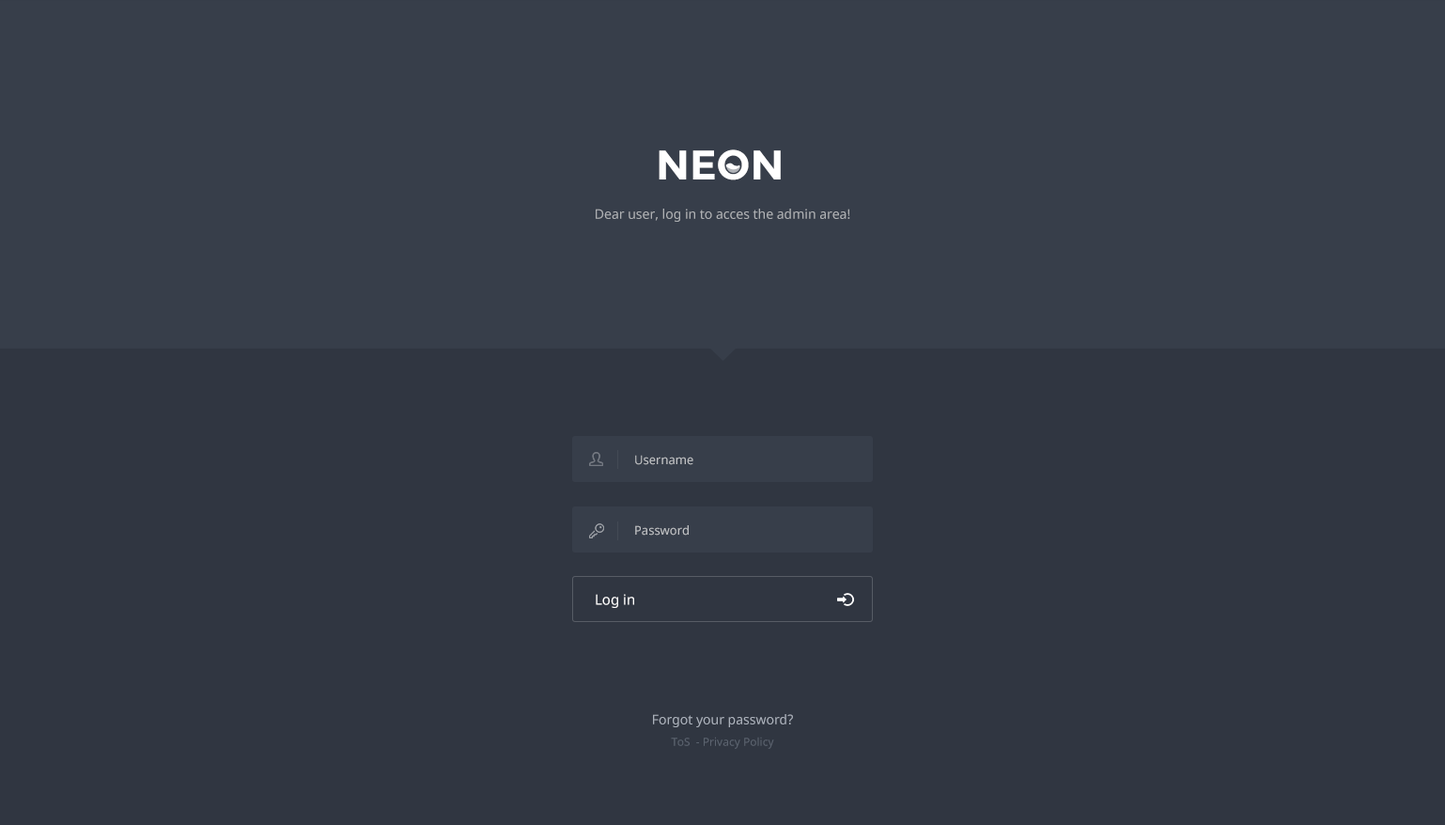
<style>
.page{position:relative;width:1445px;height:825px;background:#303641}
.page>*{position:absolute;margin:0}
.t1{font:41.3px "Montserrat-Bold";color:#ffffff}
.t2{font:13.2px "NotoSans";color:#aeb0b4}
.t3{font:12.2px "NotoSans";color:#c0c1c4}
.t4{font:14.1px "NotoSans";color:#ffffff}
.t5{font:13.2px/28.2px "NotoSans";color:#abb1bb}
.t6{font:11.3px/28.2px "NotoSans";color:#5c6470}
</style>
<div class="page">
<p class="t1" style="left:659px;top:149px;width:122px;height:31px">NEON</p>
<p class="t2" style="left:596px;top:209px;width:254px;height:13px">Dear user, log in to acces the admin area!</p>
<p class="t3" style="left:635px;top:455px;width:59px;height:10px">Username</p>
<p class="t3" style="left:635px;top:525px;width:54px;height:11px">Password</p>
<p class="t4" style="left:596px;top:594px;width:38px;height:14px">Log in</p>
<p class="t5" style="left:653px;top:714px;width:140px;height:35px;text-align:center">Forgot your password?<br><span class="t6">ToS  - Privacy Policy</span></p>
</div>
